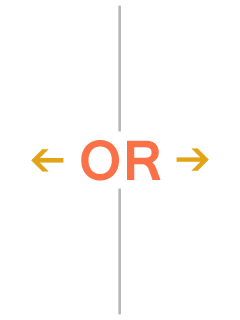
<style>
.page{position:relative;width:240px;height:320px;background:#ffffff}
.page>*{position:absolute;margin:0}
.t1{font:53px "Mangal-Bold";color:#fa7147}
</style>
<div class="page">
<p class="t1" style="left:81px;top:140px;width:80px;height:41px">OR</p>
</div>
